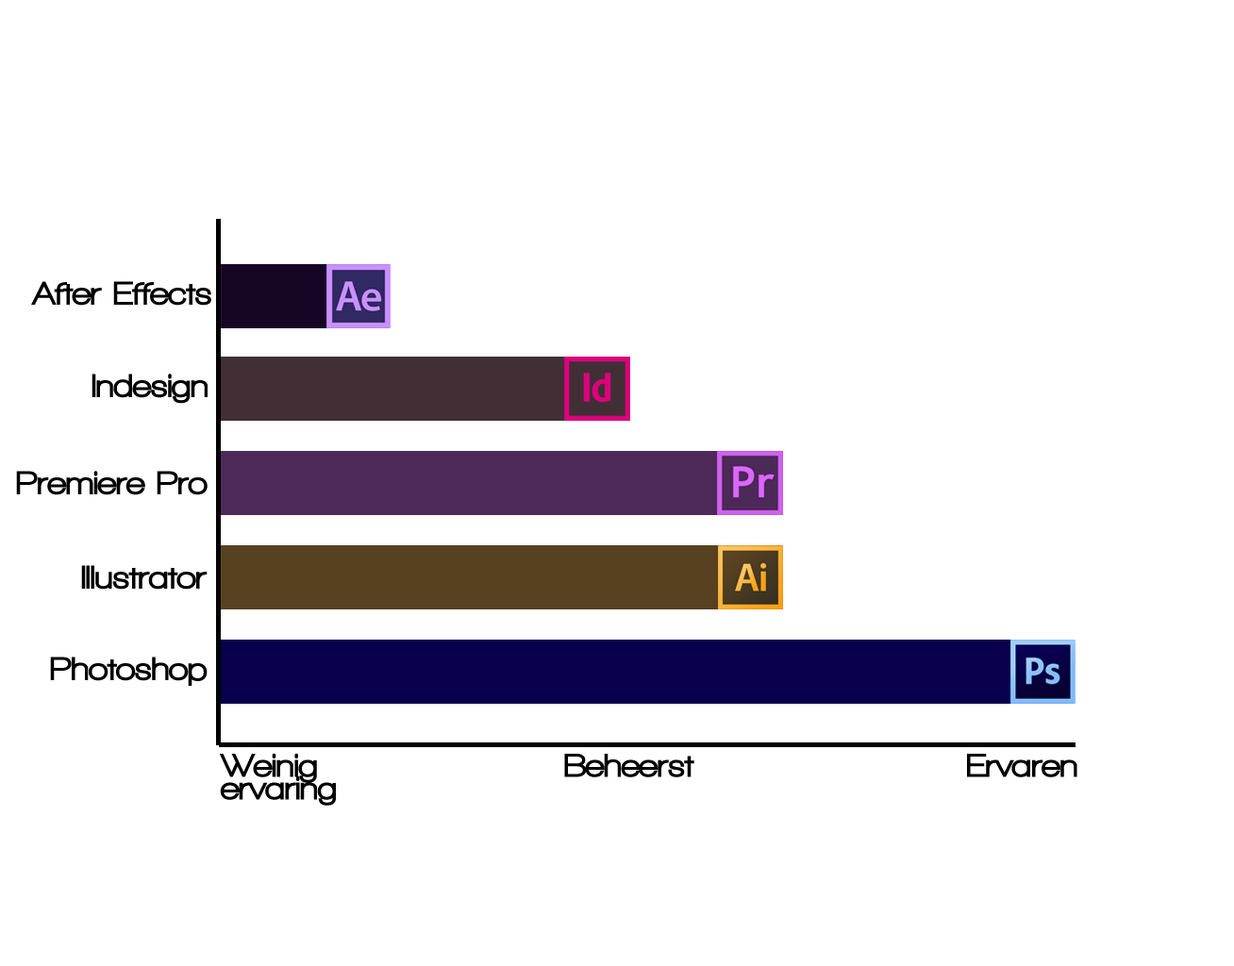
<style>
.page{position:relative;width:1234px;height:966px;background:#ffffff}
.page>*{position:absolute;margin:0}
.t1{font:34px "WalkwayBlack";color:#000000}
.t2{font:34px/22.6px "WalkwayBlack";color:#000000}
</style>
<div class="page">
<p class="t1" style="left:31px;top:281px;width:180px;height:25px">After Effects</p>
<p class="t1" style="left:92px;top:374px;width:116px;height:30px">Indesign</p>
<p class="t1" style="left:16px;top:471px;width:192px;height:24px">Premiere Pro</p>
<p class="t1" style="left:81px;top:565px;width:127px;height:25px">Illustrator</p>
<p class="t1" style="left:50px;top:657px;width:158px;height:29px">Photoshop</p>
<p class="t2" style="left:219px;top:753px;width:117px;height:53px">Weinig <br>ervaring</p>
<p class="t1" style="left:564px;top:754px;width:130px;height:23px">Beheerst</p>
<p class="t1" style="left:967px;top:754px;width:111px;height:23px">Ervaren</p>
</div>
